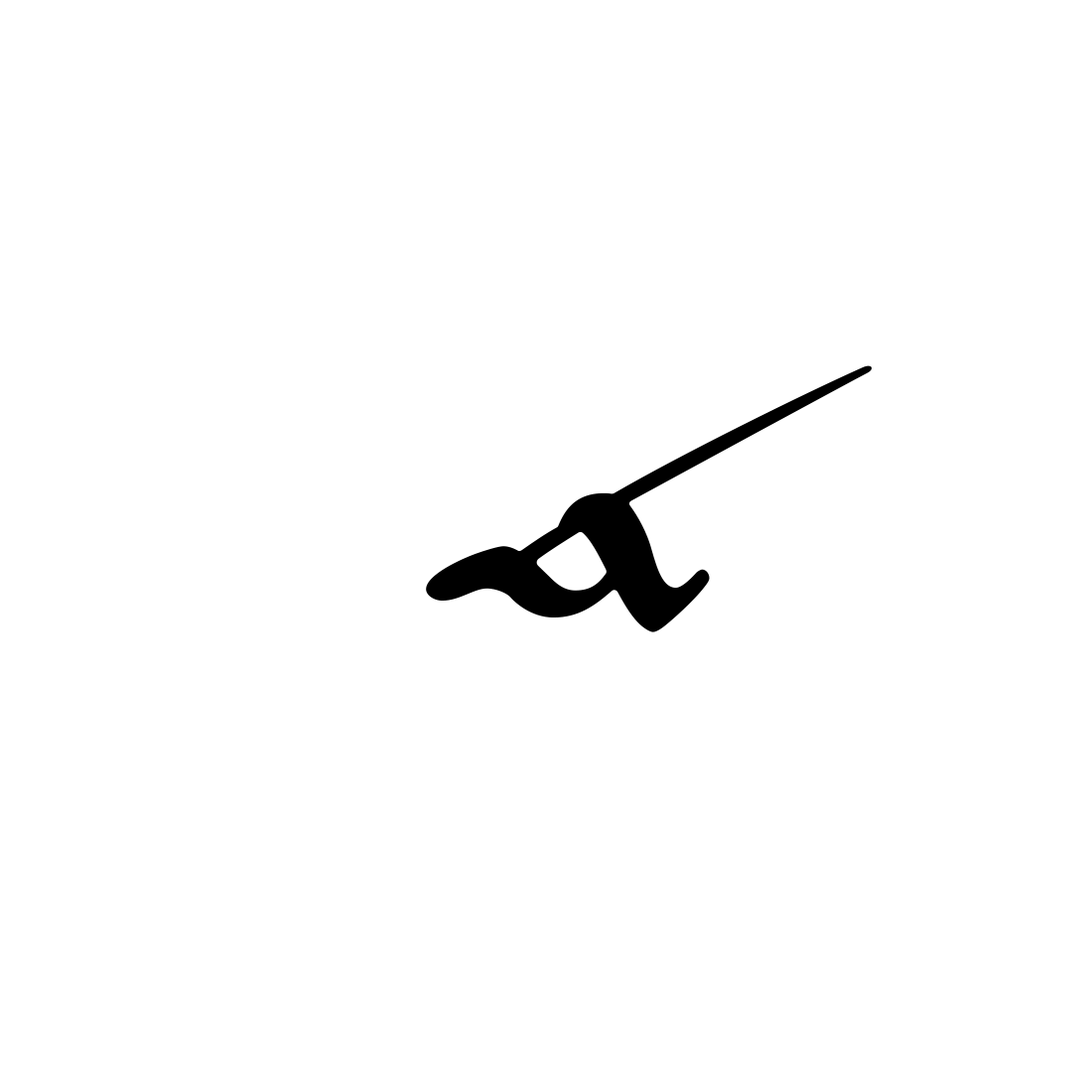
<style>
.page{position:relative;width:1092px;height:1092px;background:#ffffff}
.page>*{position:absolute;margin:0}
.t1{font:337.5px "Joscelyn";color:#000000}
</style>
<div class="page">
<p class="t1" style="left:426px;top:365px;width:446px;height:267px">a</p>
</div>
